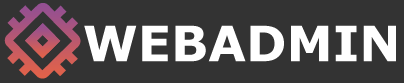
<style>
.page{position:relative;width:404px;height:83px;background:#333333}
.page>*{position:absolute;margin:0}
.t1{font:48.7px "Verdana-Bold";color:#ffffff}
</style>
<div class="page">
<p class="t1" style="left:84px;top:25px;width:312px;height:37px">WEBADMIN</p>
</div>
